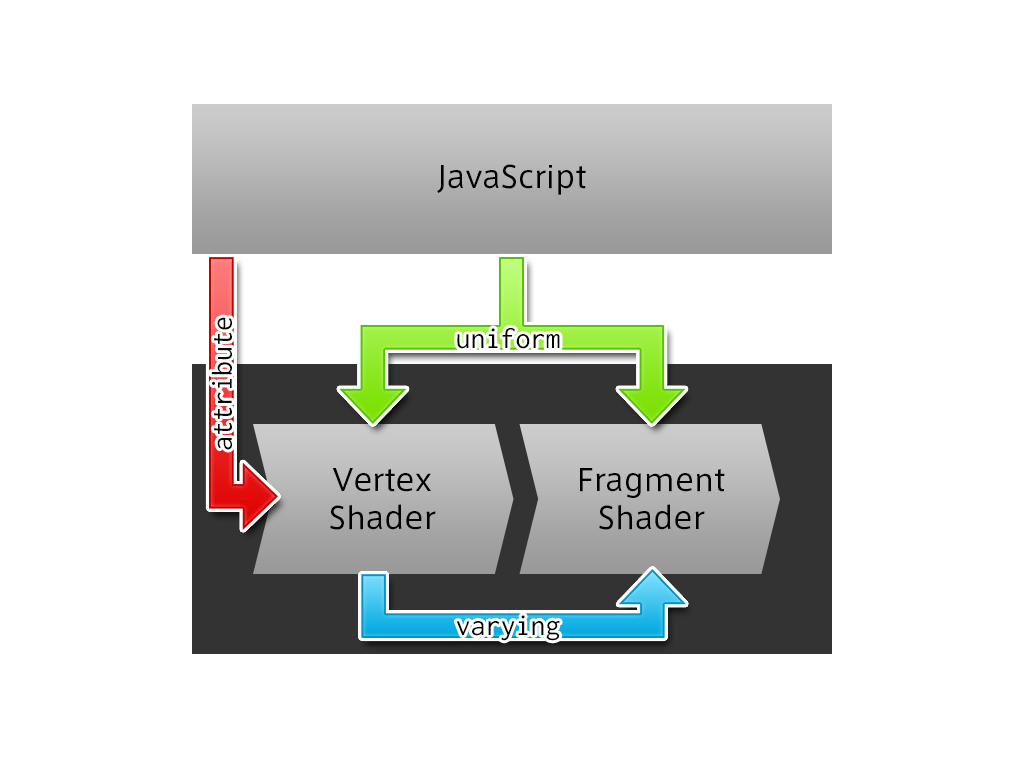
<style>
.page{position:relative;width:1024px;height:768px;background:#ffffff}
.page>*{position:absolute;margin:0}
.t1{font:30px "AxisStd-Regular";color:#000000}
.t2{font:30.1px "Ricty-Regular";color:#000000}
.t3{font:30px "Ricty-Regular";color:#000000}
.t4{font:30px/38px "AxisStd-Regular";color:#000000}
</style>
<div class="page">
<p class="t1" style="left:437px;top:164px;width:149px;height:31px">JavaScript</p>
<p class="t2" style="left:211px;top:317px;width:21px;height:133px;rotate:-90deg">attribute</p>
<p class="t3" style="left:457px;top:327px;width:103px;height:22px">uniform</p>
<p class="t4" style="left:330px;top:468px;width:106px;height:62px;text-align:center">Vertex<br>Shader</p>
<p class="t4" style="left:580px;top:468px;width:145px;height:62px;text-align:center">Fragment<br>Shader</p>
<p class="t3" style="left:456px;top:615px;width:104px;height:26px">varying</p>
</div>
